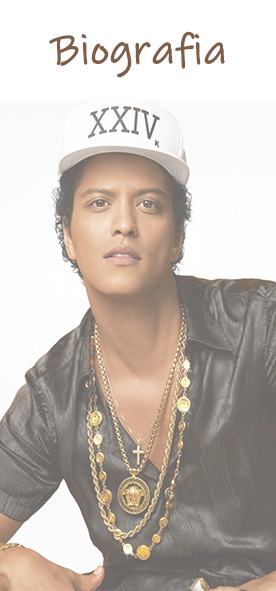
<style>
.page{position:relative;width:276px;height:591px}
.page>*{position:absolute;margin:0}
.t1{font:41.7px "InkFree";color:#805d46;font-weight:bold}
</style>
<div class="page">
<p class="t1" style="left:49px;top:31px;width:176px;height:47px">Biografia</p>
</div>
